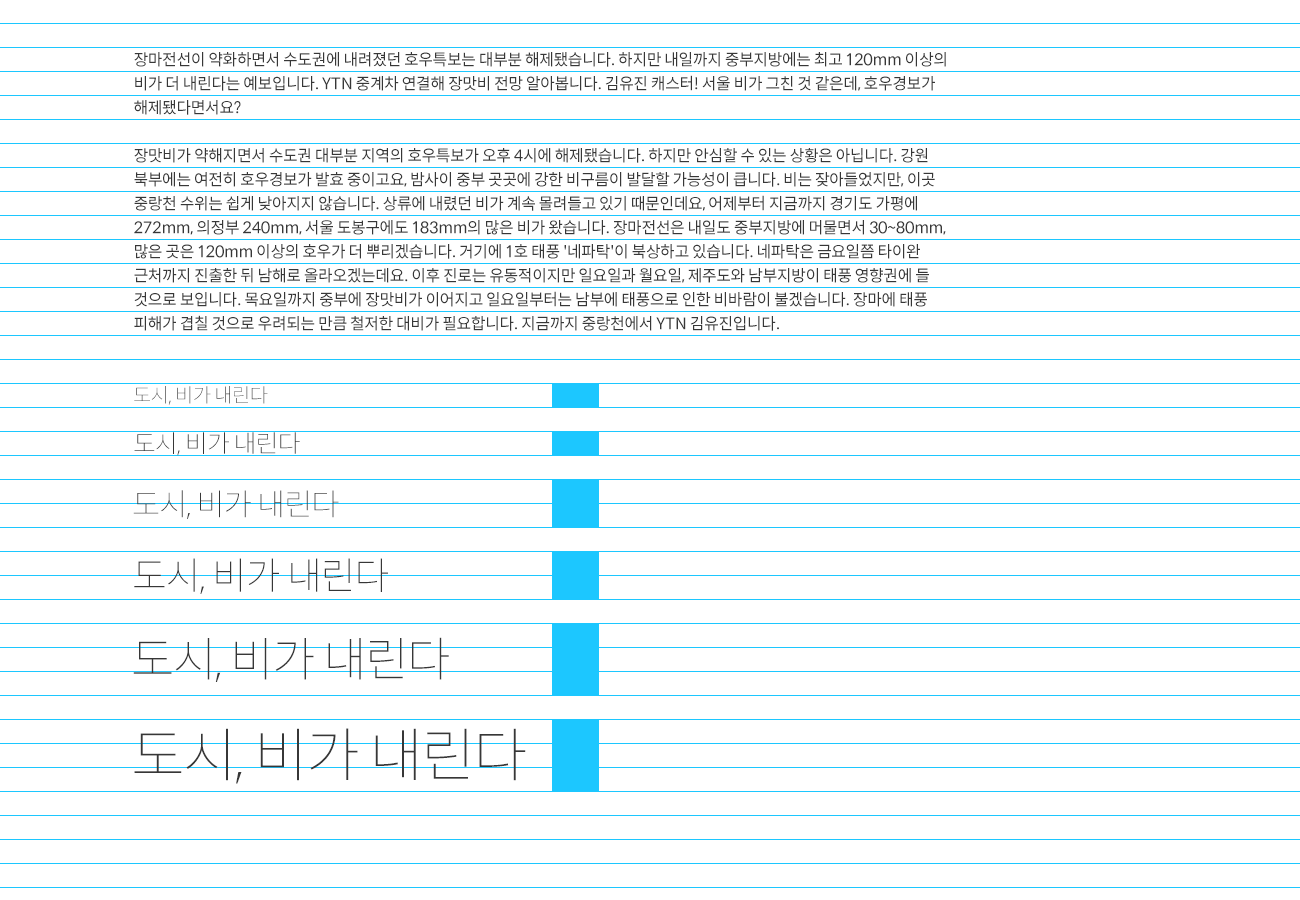
<style>
.page{position:relative;width:1300px;height:900px;background:#ffffff}
.page>*{position:absolute;margin:0}
.t1{font:16px "SpoqaHanSans-Regular";letter-spacing:-0.025em;color:#373737}
.t2{font:19.8px "SpoqaHanSans-Thin";letter-spacing:-0.025em}
.t3{font:24.6px "SpoqaHanSans-Thin";letter-spacing:-0.025em;color:#373737}
.t4{font:30.5px "SpoqaHanSans-Thin";letter-spacing:-0.025em;color:#373737}
.t5{font:37.8px "SpoqaHanSans-Thin";letter-spacing:-0.025em;color:#373737}
.t6{font:46.9px "SpoqaHanSans-Thin";letter-spacing:-0.025em;color:#373737}
.t7{font:58.2px "SpoqaHanSans-Thin";letter-spacing:-0.025em;color:#373737}
</style>
<div class="page">
<p class="t1" style="left:134px;top:52px;width:812px;height:279px">장마전선이 약화하면서 수도권에 내려졌던 호우특보는 대부분 해제됐습니다. 하지만 내일까지 중부지방에는 최고 120mm 이상의 비가 더 내린다는 예보입니다. YTN 중계차 연결해 장맛비 전망 알아봅니다. 김유진 캐스터! 서울 비가 그친 것 같은데, 호우경보가 해제됐다면서요?<br>장맛비가 약해지면서 수도권 대부분 지역의 호우특보가 오후 4시에 해제됐습니다. 하지만 안심할 수 있는 상황은 아닙니다. 강원 북부에는 여전히 호우경보가 발효 중이고요, 밤사이 중부 곳곳에 강한 비구름이 발달할 가능성이 큽니다. 비는 잦아들었지만, 이곳 중랑천 수위는 쉽게 낮아지지 않습니다. 상류에 내렸던 비가 계속 몰려들고 있기 때문인데요, 어제부터 지금까지 경기도 가평에 272mm, 의정부 240mm, 서울 도봉구에도 183mm의 많은 비가 왔습니다. 장마전선은 내일도 중부지방에 머물면서 30~80mm, 많은 곳은 120mm 이상의 호우가 더 뿌리겠습니다. 거기에 1호 태풍 '네파탁'이 북상하고 있습니다. 네파탁은 금요일쯤 타이완 근처까지 진출한 뒤 남해로 올라오겠는데요. 이후 진로는 유동적이지만 일요일과 월요일, 제주도와 남부지방이 태풍 영향권에 들 것으로 보입니다. 목요일까지 중부에 장맛비가 이어지고 일요일부터는 남부에 태풍으로 인한 비바람이 불겠습니다. 장마에 태풍 피해가 겹칠 것으로 우려되는 만큼 철저한 대비가 필요합니다. 지금까지 중랑천에서 YTN 김유진입니다.</p>
<p class="t2" style="left:134px;top:386px;width:134px;height:19px">도시, 비가 내린다</p>
<p class="t3" style="left:134px;top:432px;width:166px;height:24px">도시, 비가 내린다</p>
<p class="t4" style="left:133px;top:490px;width:206px;height:29px">도시, 비가 내린다</p>
<p class="t5" style="left:134px;top:558px;width:254px;height:36px">도시, 비가 내린다</p>
<p class="t6" style="left:133px;top:637px;width:316px;height:45px">도시, 비가 내린다</p>
<p class="t7" style="left:134px;top:728px;width:392px;height:56px">도시, 비가 내린다</p>
</div>
